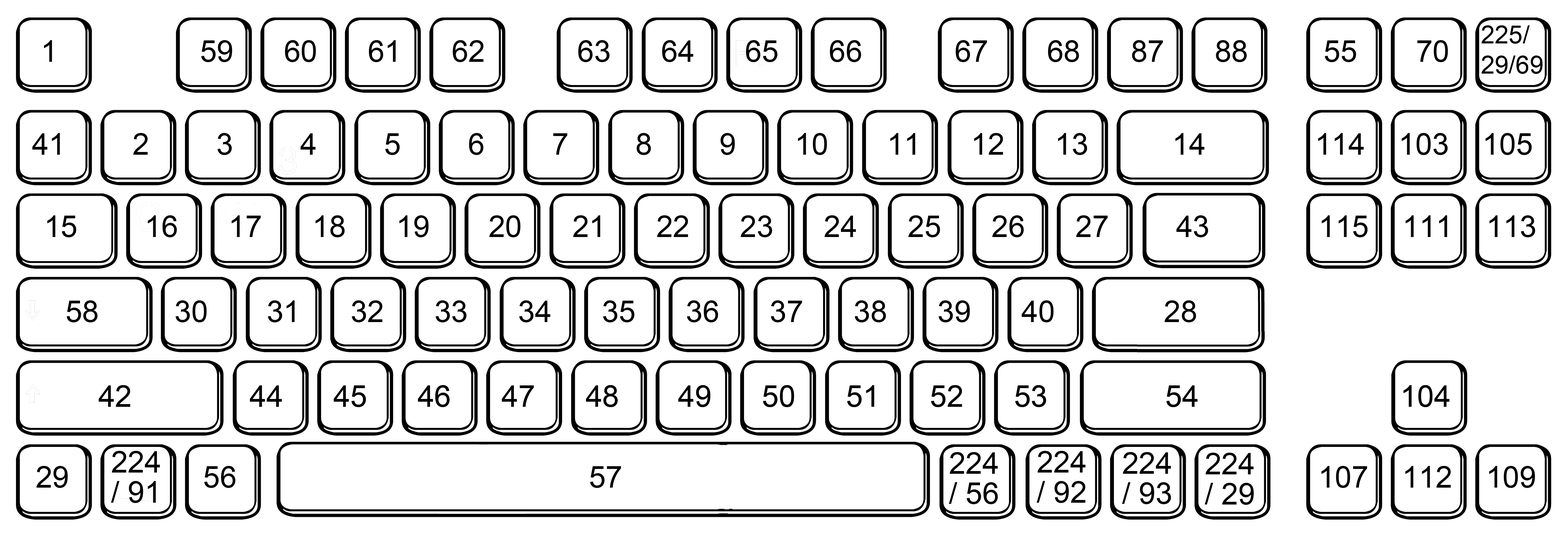
<style>
.page{position:relative;width:1568px;height:541px;background:#ffffff}
.page>*{position:absolute;margin:0}
.t1{font:25.1px/30.2px "ArialMT";color:#000000}
.t2{font:30.2px "ArialMT";color:#000000}
.t3{font:30.2px/30.2px "ArialMT";color:#000000}
</style>
<div class="page">
<p class="t1" style="left:1481px;top:25px;width:62px;height:49px">225/<br>29/69</p>
<p class="t2" style="left:44px;top:40px;width:1404px;height:22px">1                 59      60      61      62           63      64      65      66           67       68      87      88         55       70</p>
<p class="t2" style="left:32px;top:133px;width:1500px;height:22px">41        2        3        4        5        6        7        8        9       10       11      12      13          14             114    103    105</p>
<p class="t2" style="left:47px;top:215px;width:1488px;height:22px">15        16      17      18      19       20      21      22      23      24      25      26      27        43             115    111    113</p>
<p class="t2" style="left:67px;top:301px;width:1129px;height:22px">58         30       31      32      33      34      35      36      37      38      39      40             28</p>
<p class="t2" style="left:99px;top:385px;width:1350px;height:22px">42              44      45      46      47      48       49      50      51      52      53              54                        104</p>
<p class="t3" style="left:111px;top:451px;width:49px;height:52px">224<br>/ 91</p>
<p class="t3" style="left:949px;top:452px;width:49px;height:52px">224<br>/ 56</p>
<p class="t3" style="left:1037px;top:451px;width:49px;height:52px">224<br>/ 92</p>
<p class="t3" style="left:1122px;top:452px;width:49px;height:52px">224<br>/ 93</p>
<p class="t3" style="left:1205px;top:453px;width:49px;height:52px">224<br>/ 29</p>
<p class="t2" style="left:37px;top:466px;width:1498px;height:22px">29                56                                          57                                                                                   107    112    109</p>
</div>
